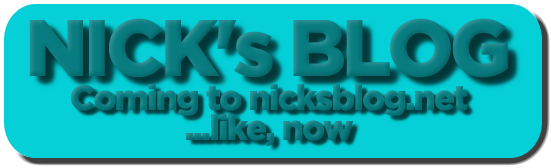
<style>
.page{position:relative;width:551px;height:168px;background:#05d0d7}
.page>*{position:absolute;margin:0}
.t1{font:80px "GothamBlack";letter-spacing:-0.05em;color:#087c80}
.t2{font:35px/30px "GothamBlack";letter-spacing:-0.05em;color:#087c80}
</style>
<div class="page">
<p class="t1" style="left:29px;top:18px;width:479px;height:60px">NICK's BLOG</p>
<p class="t2" style="left:71px;top:84px;width:397px;height:62px;text-align:center">Coming to nicksblog.net<br>...like, now</p>
</div>
